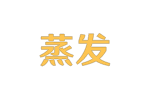
<style>
.page{position:relative;width:150px;height:100px;background:#ffffff}
.page>*{position:absolute;margin:0}
.t1{font:35.4px "HYWenHei-HEW";letter-spacing:0.05em;color:#fec552}
</style>
<div class="page">
<p class="t1" style="left:39px;top:33px;width:71px;height:34px">蒸发</p>
</div>
